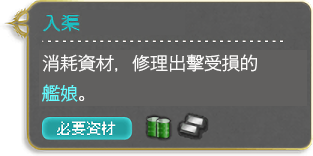
<style>
.page{position:relative;width:313px;height:156px;background:#61605f}
.page>*{position:absolute;margin:0}
.t1{font:18px/30px "GothicMB101Pr6N-Light";color:#fbfaf9}
.t2{font:18px/30px "GothicMB101Pr6N-Light";color:#64fbff}
</style>
<div class="page">
<p class="t1" style="left:42px;top:54px;width:215px;height:48px">消耗資材，修理出擊受損的<br><span class="t2">艦娘</span>。</p>
</div>
